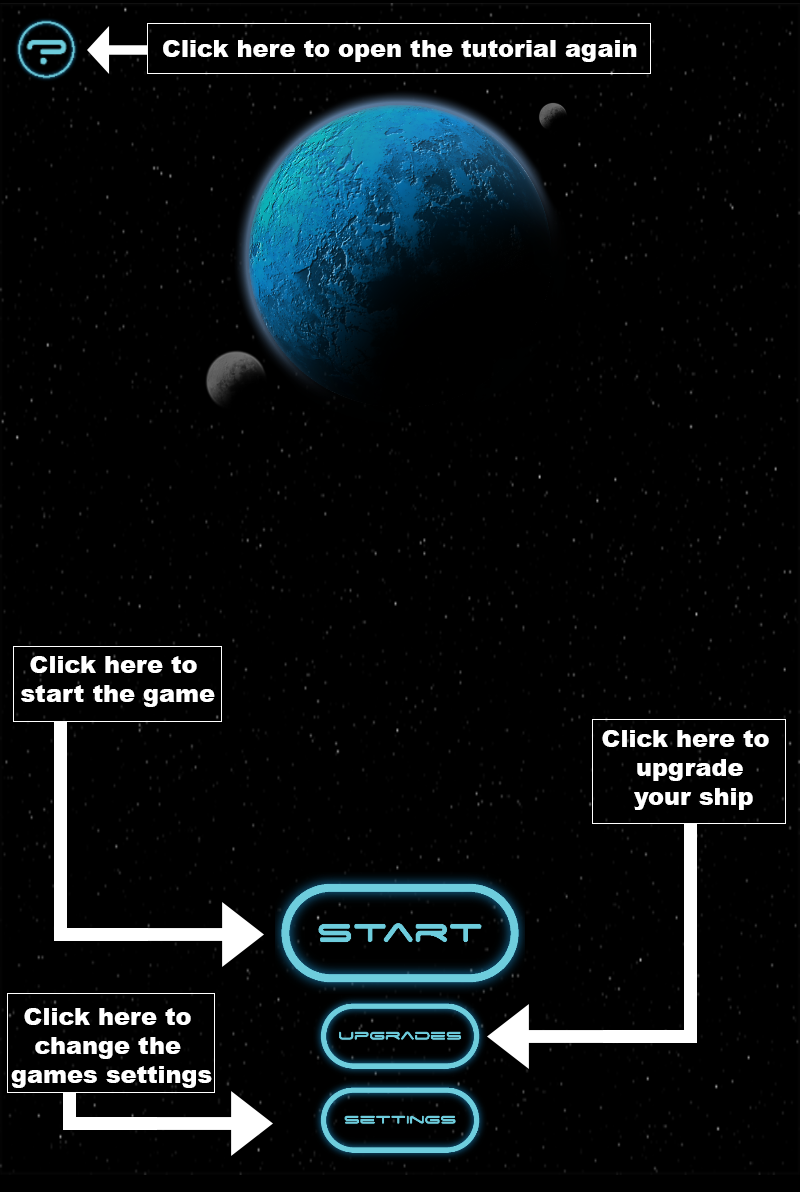
<style>
.page{position:relative;width:800px;height:1192px;background:#000000}
.page>*{position:absolute;margin:0}
.t1{font:24px "Arial-Black";color:#ffffff}
</style>
<div class="page">
<p class="t1" style="left:163px;top:40px;width:474px;height:22px">Click here to open the tutorial again</p>
<p class="t1" style="left:21px;top:656px;width:194px;height:51px;text-align:center">Click here to <br>start the game</p>
<p class="t1" style="left:602px;top:730px;width:167px;height:80px;text-align:center">Click here to <br>upgrade<br> your ship</p>
<p class="t1" style="left:11px;top:1008px;width:201px;height:80px;text-align:center">Click here to <br>change the <br>games settings</p>
</div>
